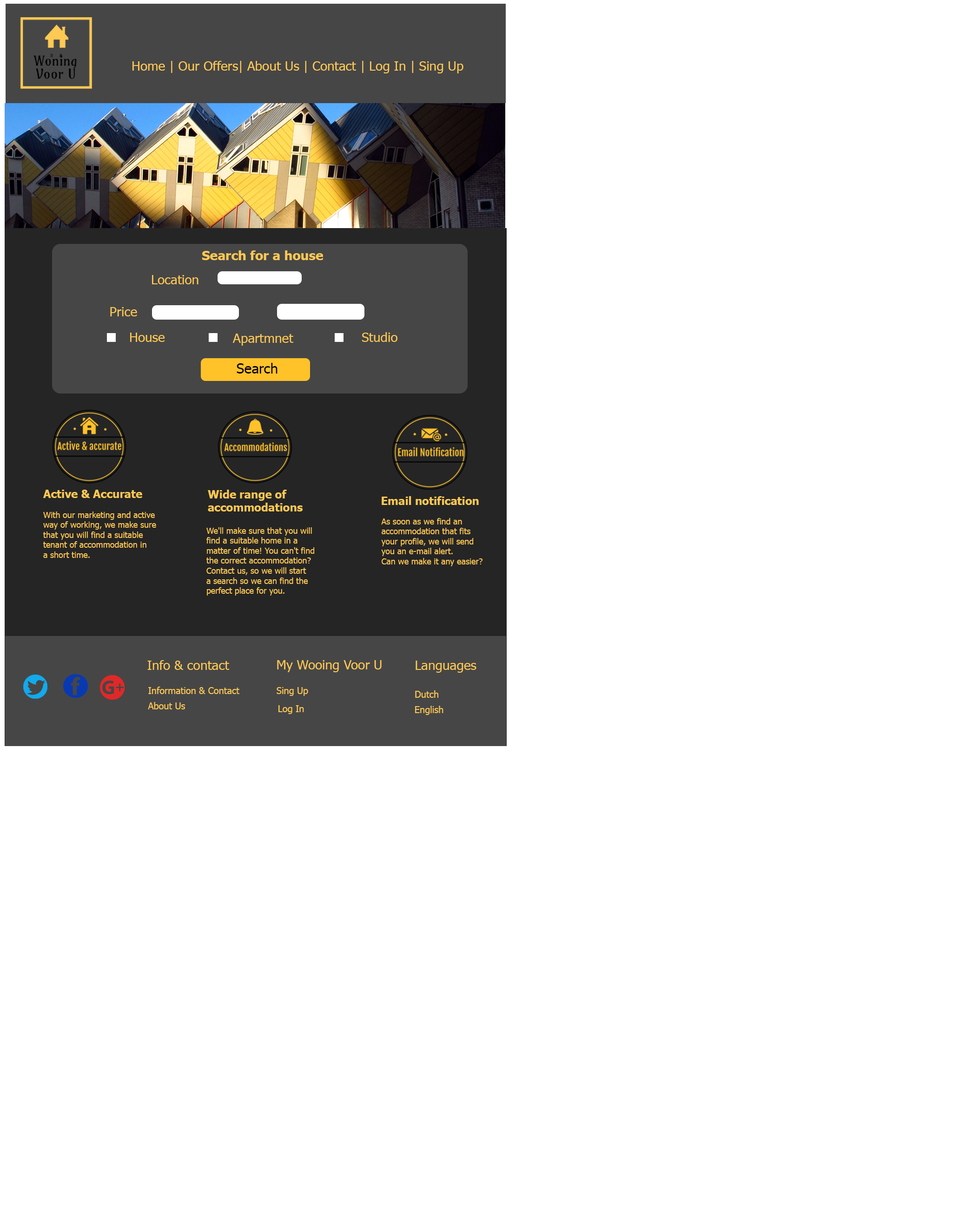
<style>
.page{position:relative;width:978px;height:1219px;background:#ffffff}
.page>*{position:absolute;margin:0}
.t1{font:13px "Tahoma";color:#ffc954}
.t2{font:13px "Tahoma-Bold";color:#ffc954}
.t3{font:13.9px "Tahoma";color:#000000}
.t4{font:11.2px "Tahoma-Bold";color:#ffc954}
.t5{font:8.4px "Tahoma";color:#ffc954}
.t6{font:9.3px "Tahoma";color:#ffc954}
</style>
<div class="page">
<p class="t1" style="left:132px;top:61px;width:331px;height:12px">Home | Our Offers| About Us | Contact | Log In | Sing Up</p>
<p class="t2" style="left:202px;top:250px;width:121px;height:10px">Search for a house</p>
<p class="t1" style="left:152px;top:275px;width:46px;height:9px">Location</p>
<p class="t1" style="left:110px;top:307px;width:27px;height:9px">Price</p>
<p class="t1" style="left:130px;top:333px;width:35px;height:9px">House</p>
<p class="t1" style="left:232px;top:334px;width:61px;height:12px">Apartmnet</p>
<p class="t1" style="left:362px;top:332px;width:35px;height:10px">Studio</p>
<p class="t3" style="left:237px;top:363px;width:40px;height:11px">Search</p>
<p class="t4" style="left:43px;top:490px;width:99px;height:8px">Active &amp; Accurate</p>
<p class="t4" style="left:208px;top:490px;width:95px;height:22px">Wide range of<br>accommodations</p>
<p class="t4" style="left:382px;top:496px;width:97px;height:9px">Email notification</p>
<p class="t5" style="left:43px;top:512px;width:113px;height:46px">With our marketing and active<br>way of working, we make sure<br>that you will find a suitable<br>tenant of accommodation in<br>a short time.</p>
<p class="t5" style="left:381px;top:518px;width:102px;height:49px">As soon as we find an<br>accommodation that fits<br>your profile, we will send<br>you an e-mail alert.<br>Can we make it any easier?</p>
<p class="t5" style="left:206px;top:527px;width:109px;height:69px">We'll make sure that you will<br>find a suitable home in a<br>matter of time! You can't find<br>the correct accommodation?<br>Contact us, so we will start<br>a search so we can find the<br>perfect place for you.</p>
<p class="t1" style="left:147px;top:660px;width:82px;height:10px">Info &amp; contact</p>
<p class="t1" style="left:277px;top:660px;width:105px;height:12px">My Wooing Voor U</p>
<p class="t1" style="left:415px;top:661px;width:61px;height:12px">Languages</p>
<p class="t6" style="left:148px;top:687px;width:91px;height:7px">Information &amp; Contact</p>
<p class="t6" style="left:277px;top:687px;width:31px;height:9px">Sing Up</p>
<p class="t6" style="left:415px;top:691px;width:23px;height:7px">Dutch</p>
<p class="t6" style="left:148px;top:702px;width:37px;height:8px">About Us</p>
<p class="t6" style="left:278px;top:705px;width:26px;height:9px">Log In</p>
<p class="t6" style="left:415px;top:706px;width:28px;height:9px">English</p>
</div>
